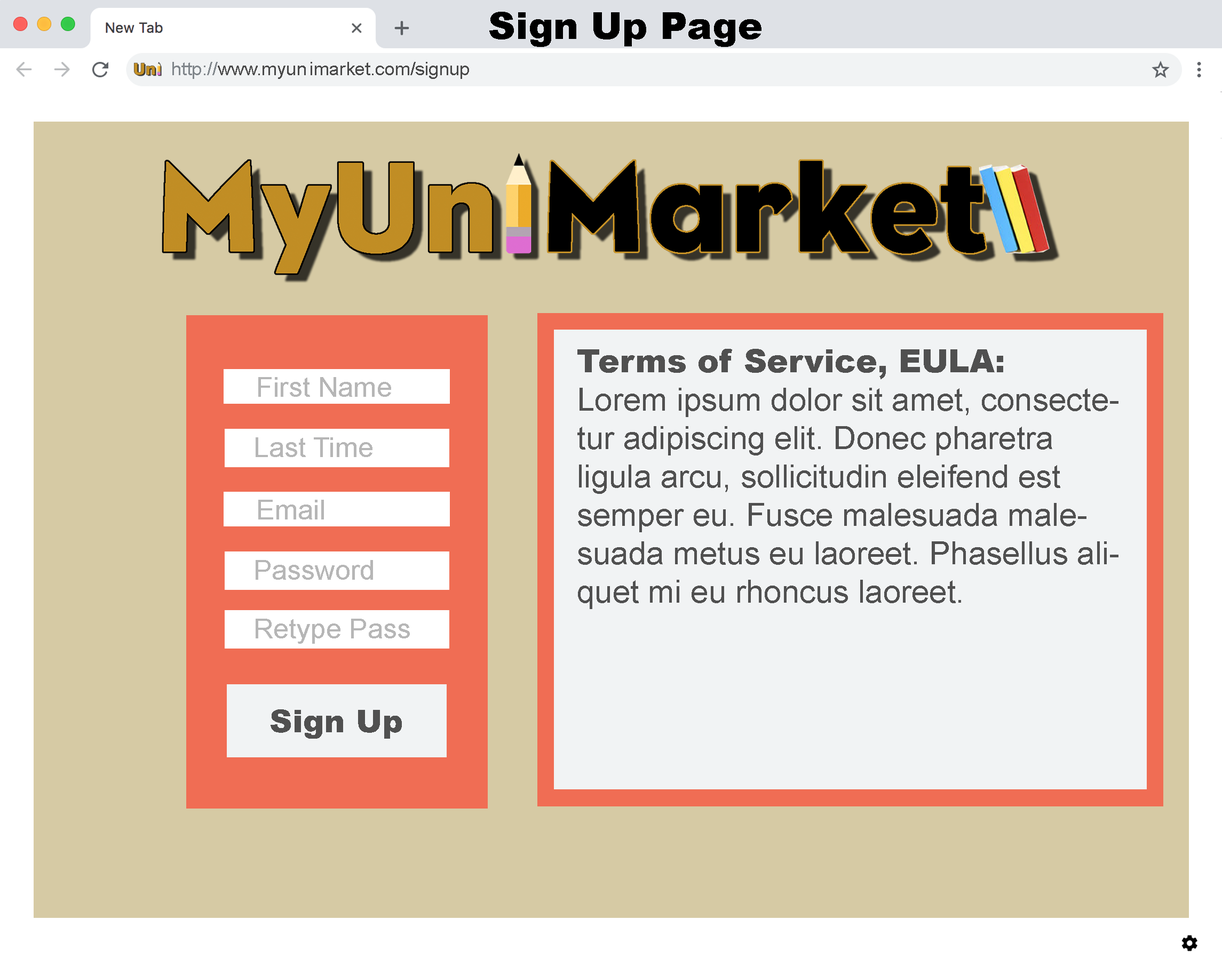
<style>
.page{position:relative;width:1222px;height:976px;background:#d6caa4}
.page>*{position:absolute;margin:0}
.t1{font:37.6px "Arial-Black";color:#000000}
.t2{font:18.5px "ArialMT";color:#494949}
.t3{font:18.5px "ArialMT";color:#80868b}
.t4{font:32px "ArialMT";color:#505050}
.t5{font:32px "Arial-Black";color:#505050}
.t6{font:27.8px "ArialMT";color:#b6b6b6}
.t7{font:31.6px "Arial-Black";color:#505050}
</style>
<div class="page">
<p class="t1" style="left:489px;top:12px;width:272px;height:35px">Sign Up Page</p>
<p class="t2" style="left:172px;top:62px;width:297px;height:17px"><span class="t3">http://</span>www.myunimarket.com/signup</p>
<p class="t4" style="left:577px;top:349px;width:541px;height:260px"><span class="t5">Terms of Service, EULA:<br></span>Lorem ipsum dolor sit amet, consectetur adipiscing elit. Donec pharetra ligula arcu, sollicitudin eleifend est semper eu. Fusce malesuada malesuada metus eu laoreet. Phasellus aliquet mi eu rhoncus laoreet.</p>
<p class="t6" style="left:258px;top:377px;width:133px;height:20px">First Name</p>
<p class="t6" style="left:256px;top:437px;width:116px;height:20px">Last Time</p>
<p class="t6" style="left:258px;top:500px;width:66px;height:20px">Email</p>
<p class="t6" style="left:256px;top:560px;width:117px;height:20px">Password</p>
<p class="t6" style="left:256px;top:619px;width:154px;height:25px">Retype Pass</p>
<p class="t7" style="left:270px;top:709px;width:132px;height:30px">Sign Up</p>
</div>
